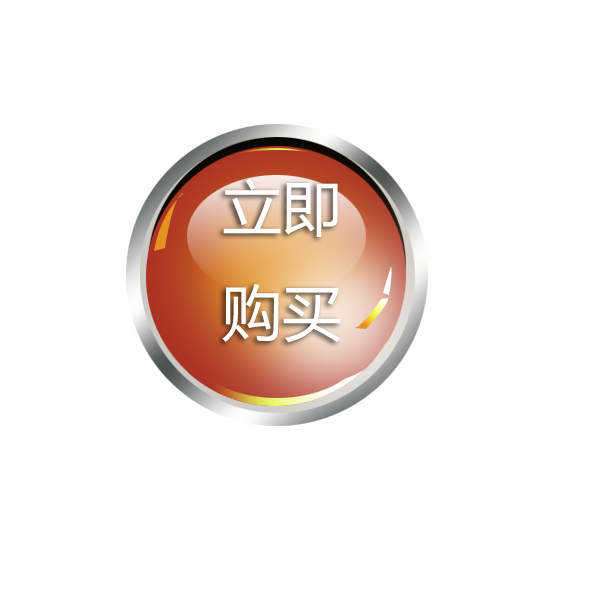
<style>
.page{position:relative;width:600px;height:600px;background:#ffffff}
.page>*{position:absolute;margin:0}
.t1{font:60px "MicrosoftYaHei";color:#ffffff}
</style>
<div class="page">
<p class="t1" style="left:222px;top:178px;width:119px;height:165px">立即<br>购买</p>
</div>
